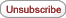
<style>
.page{position:relative;width:66px;height:18px;background:#ffffff}
.page>*{position:absolute;margin:0}
.t1{font:10px "ArialMT";color:#993333}
</style>
<div class="page">
<p class="t1" style="left:6px;top:5px;width:55px;height:8px">Unsubscribe</p>
</div>
